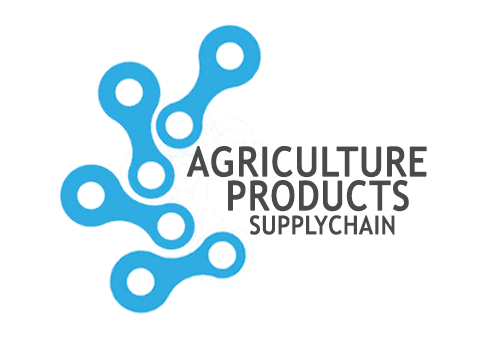
<style>
.page{position:relative;width:504px;height:360px;background:#ffffff}
.page>*{position:absolute;margin:0}
.t1{font:40.4px "TrebuchetMS";letter-spacing:0.02em;color:#494a4a;font-weight:bold;scale:0.9 1}
.t2{font:25.2px "TrebuchetMS";letter-spacing:0.02em;color:#494a4a;font-weight:bold;scale:0.9 1}
</style>
<div class="page">
<p class="t1" style="left:186px;top:146px;width:241px;height:32px">AGRICULTURE</p>
<p class="t1" style="left:228px;top:180px;width:181px;height:32px">PRODUCTS</p>
<p class="t2" style="left:250px;top:215px;width:145px;height:20px">SUPPLYCHAIN</p>
</div>
